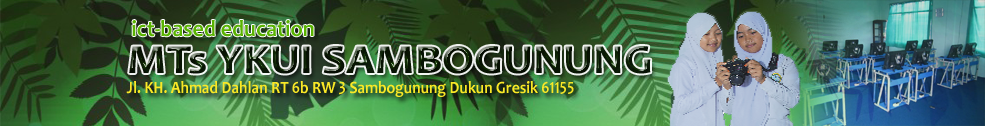
<style>
.page{position:relative;width:985px;height:126px}
.page>*{position:absolute;margin:0}
.t1{font:23.1px "Candara-Bold";color:#59b201;scale:0.95 1}
.t2{font:41.7px "Candara-Bold";color:#0b1904;scale:1.1 1}
.t3{font:17.3px "Candara-Bold";color:#f9e826;scale:0.89 1}
</style>
<div class="page">
<p class="t1" style="left:132px;top:20px;width:182px;height:17px">ict-based education</p>
<p class="t2" style="left:129px;top:46px;width:522px;height:28px">MTs YKUI SAMBOGUNUNG</p>
<p class="t3" style="left:126px;top:81px;width:448px;height:16px">Jl. KH. Ahmad Dahlan RT 6b RW 3 Sambogunung Dukun Gresik 61155</p>
</div>
